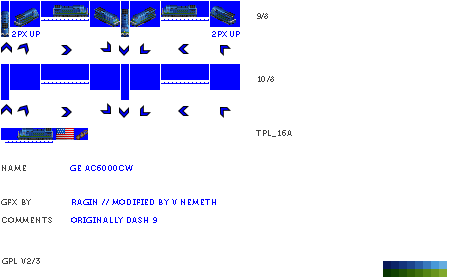
<style>
.page{position:relative;width:450px;height:280px;background:#ffffff}
.page>*{position:absolute;margin:0}
.t1{font:8px "Museo700-Regular";color:#404040}
.t2{font:8px "Museo700-Regular";color:#0000ff;text-transform:uppercase}
.t3{font:8px "Museo700-Regular";letter-spacing:0.075em;color:#404040}
.t4{font:8px "Museo700-Regular";letter-spacing:0.075em;color:#404040;text-transform:uppercase}
.t5{font:8px "Museo700-Regular";letter-spacing:0.075em;color:#0000ff;text-transform:uppercase}
</style>
<div class="page">
<p class="t1" style="left:257px;top:13px;width:11px;height:6px">9/8</p>
<p class="t2" style="left:12px;top:31px;width:28px;height:6px">2px up</p>
<p class="t2" style="left:212px;top:31px;width:28px;height:6px">2px up</p>
<p class="t3" style="left:258px;top:76px;width:16px;height:6px">10/8</p>
<p class="t4" style="left:256px;top:130px;width:36px;height:7px">tpl_16a</p>
<p class="t4" style="left:2px;top:165px;width:24px;height:6px">name</p>
<p class="t5" style="left:70px;top:165px;width:63px;height:6px">GE AC6000CW</p>
<p class="t4" style="left:1px;top:199px;width:30px;height:6px">gfx by</p>
<p class="t5" style="left:72px;top:199px;width:144px;height:6px">ragin // modified by v nemeth</p>
<p class="t4" style="left:2px;top:217px;width:50px;height:6px">comments</p>
<p class="t5" style="left:71px;top:217px;width:86px;height:6px">originally dash 9</p>
<p class="t4" style="left:2px;top:258px;width:38px;height:6px">gpl v2/3</p>
</div>
